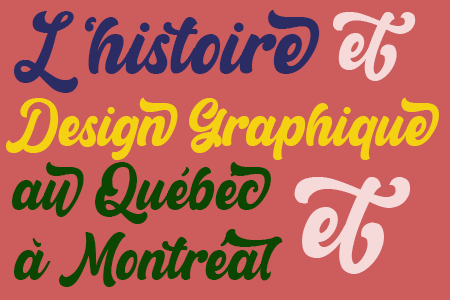
<style>
.page{position:relative;width:450px;height:300px;background:#cd5c5c}
.page>*{position:absolute;margin:0}
.t1{font:76.4px "RetrowMentho";color:#2b2c63}
.t2{font:69.4px "RetrowMentho";color:#f6dada}
.t3{font:55.6px "RetrowMentho";color:#f4d111}
.t4{font:55.6px "RetrowMentho";color:#0b4703}
.t5{font:97.2px "RetrowMentho";color:#f6dada}
</style>
<div class="page">
<p class="t1" style="left:14px;top:9px;width:306px;height:84px">L ‘histoire</p>
<p class="t2" style="left:333px;top:12px;width:83px;height:69px">et</p>
<p class="t3" style="left:6px;top:97px;width:433px;height:63px">Design Graphique</p>
<p class="t4" style="left:12px;top:161px;width:259px;height:63px">au Québéc</p>
<p class="t5" style="left:294px;top:177px;width:117px;height:97px">et</p>
<p class="t4" style="left:14px;top:229px;width:269px;height:58px">à Montréal</p>
</div>
